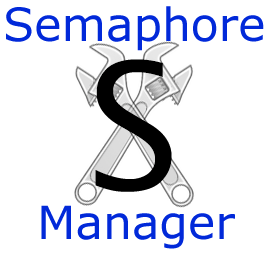
<style>
.page{position:relative;width:267px;height:254px;background:#ffffff}
.page>*{position:absolute;margin:0}
.t1{font:45.7px "Verdana";color:#0129d9}
.t2{font:164.6px "Monaco";color:#000000}
</style>
<div class="page">
<p class="t1" style="left:6px;top:6px;width:258px;height:45px">Semaphore</p>
<p class="t2" style="left:95px;top:59px;width:77px;height:133px">S</p>
<p class="t1" style="left:41px;top:205px;width:194px;height:44px">Manager</p>
</div>
